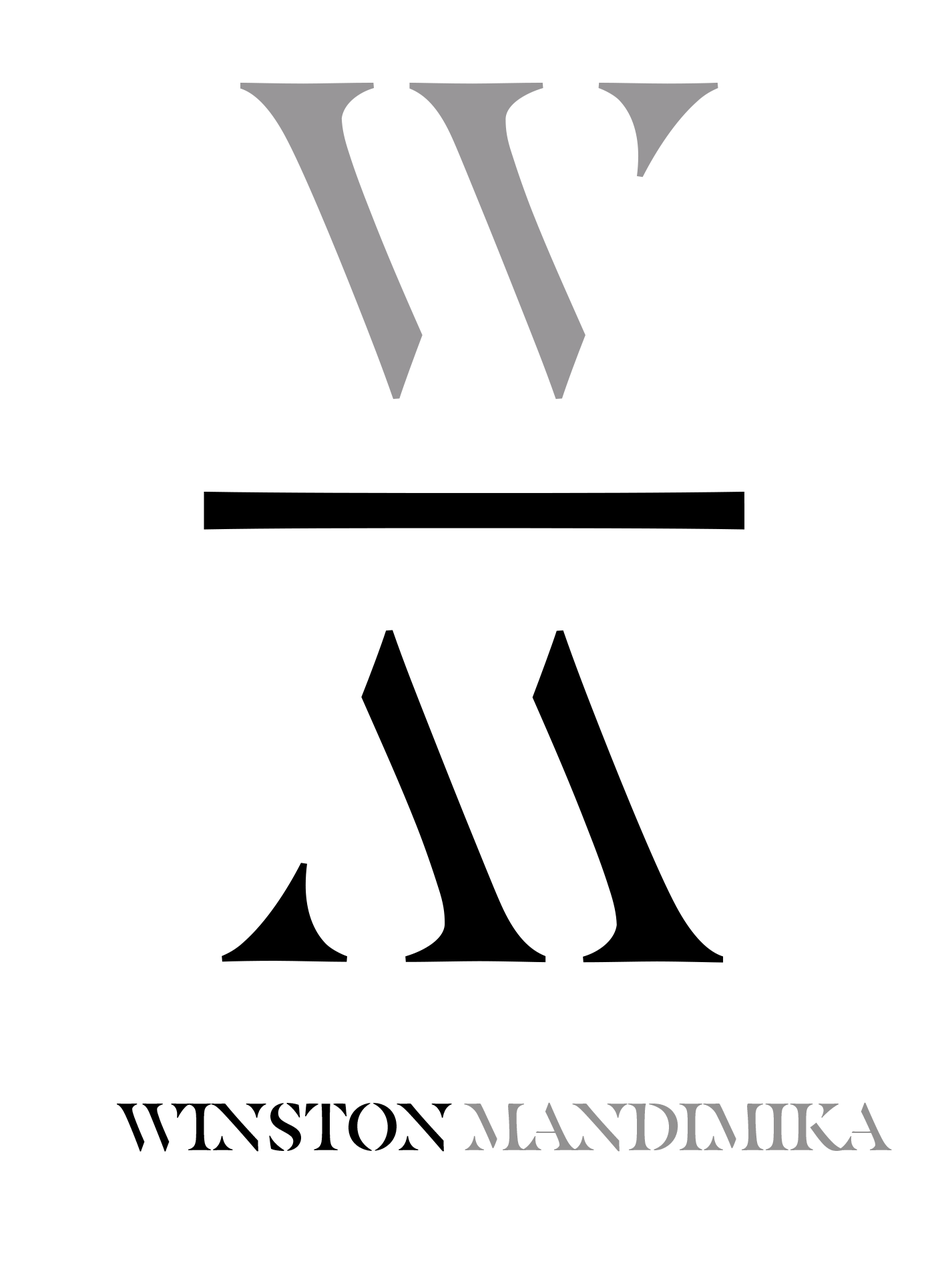
<style>
.page{position:relative;width:946px;height:1261px;background:#ffffff}
.page>*{position:absolute;margin:0}
.t1{font:440.4px "MasqualeroStencil-Regular";color:#989698}
.t2{font:1259px "MasqualeroStencil-Regular";color:#000000}
.t3{font:462.2px "MasqualeroStencil-Regular";color:#000000}
.t4{font:66.7px "MasqualeroStencil-Regular";color:#929191}
.t5{font:66.7px "MasqualeroStencil-Regular";color:#000000}
</style>
<div class="page">
<p class="t1" style="left:240px;top:82px;width:478px;height:317px">W</p>
<p class="t2" style="left:204px;top:492px;width:541px;height:38px">_</p>
<p class="t3" style="left:222px;top:630px;width:501px;height:333px;rotate:-180deg">W</p>
<p class="t4" style="left:117px;top:1102px;width:774px;height:50px"><span class="t5">Winston </span>Mandimika</p>
</div>
